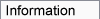
<style>
.page{position:relative;width:100px;height:19px;background:#fafafa}
.page>*{position:absolute;margin:0}
.t1{font:14px "ArialMT";color:#000000}
</style>
<div class="page">
<p class="t1" style="left:6px;top:5px;width:69px;height:11px">Information</p>
</div>
